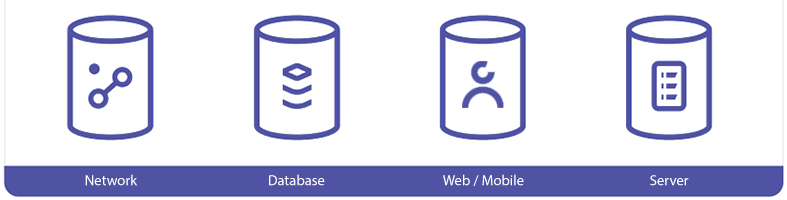
<style>
.page{position:relative;width:787px;height:200px;background:#ffffff}
.page>*{position:absolute;margin:0}
.t1{font:14.7px "MyriadPro-Regular";color:#ffffff}
</style>
<div class="page">
<p class="t1" style="left:85px;top:174px;width:53px;height:12px">Network</p>
<p class="t1" style="left:269px;top:174px;width:56px;height:12px">Database</p>
<p class="t1" style="left:443px;top:174px;width:81px;height:12px">Web / Mobile</p>
<p class="t1" style="left:650px;top:175px;width:39px;height:11px">Server</p>
</div>
